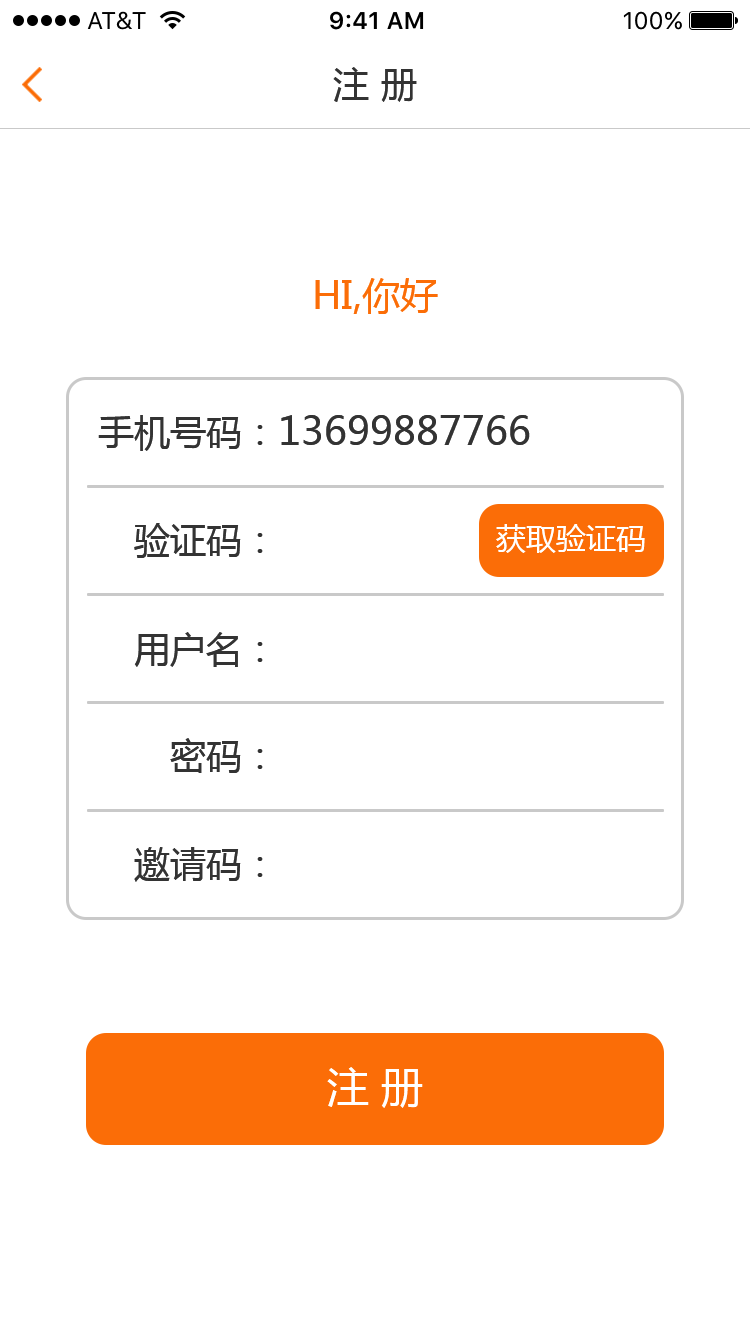
<style>
.page{position:relative;width:750px;height:1334px;background:#ffffff}
.page>*{position:absolute;margin:0}
.t1{font:36px "MicrosoftYaHei";color:#333333}
.t2{font:38px "MicrosoftYaHei";color:#fb6d07}
.t3{font:39px "MicrosoftYaHei";color:#333333}
.t4{font:30px "MicrosoftYaHei";color:#ffffff}
.t5{font:42px "MicrosoftYaHei";color:#ffffff}
</style>
<div class="page">
<p class="t1" style="left:333px;top:67px;width:84px;height:35px">注 册</p>
<p class="t2" style="left:315px;top:278px;width:123px;height:36px">HI,你好</p>
<p class="t3" style="left:98px;top:415px;width:432px;height:36px"><span class="t1">手机号码：</span>13699887766</p>
<p class="t1" style="left:134px;top:523px;width:129px;height:35px">验证码：</p>
<p class="t4" style="left:496px;top:524px;width:149px;height:29px">获取验证码</p>
<p class="t1" style="left:134px;top:632px;width:129px;height:35px">用户名：</p>
<p class="t1" style="left:170px;top:738px;width:93px;height:35px">密码：</p>
<p class="t1" style="left:134px;top:847px;width:129px;height:35px">邀请码：</p>
<p class="t5" style="left:327px;top:1067px;width:96px;height:41px">注 册</p>
</div>
